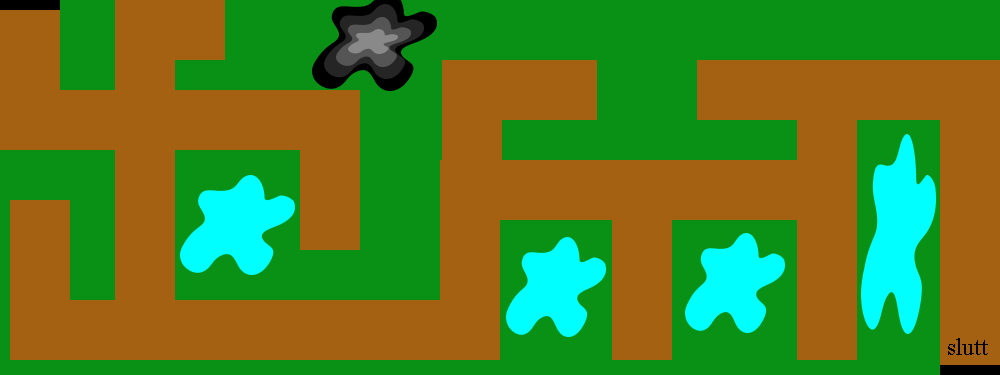
<style>
.page{position:relative;width:1000px;height:375px;background:#a46112}
.page>*{position:absolute;margin:0}
.t1{font:24px "TimesNewRomanPSMT";color:#000000}
</style>
<div class="page">
<p class="t1" style="left:948px;top:338px;width:40px;height:17px">slutt</p>
</div>
